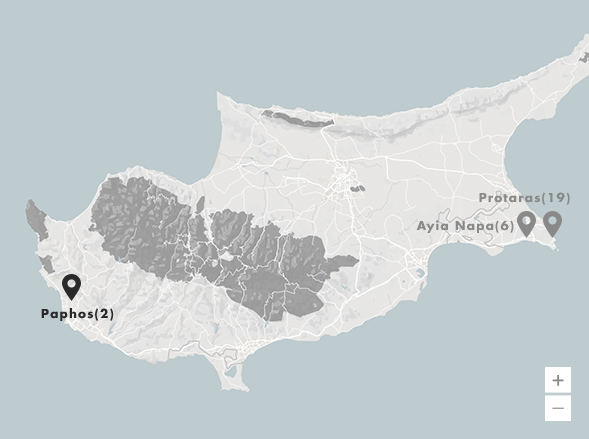
<style>
.page{position:relative;width:589px;height:439px;background:#becbcf}
.page>*{position:absolute;margin:0}
.t1{font:12px "FuturaLT-Bold";letter-spacing:0.1em;color:#898989}
.t2{font:12px "FuturaLT-Bold";letter-spacing:0.1em;color:#292929}
.t3{font:22px "FuturaLT";letter-spacing:0.1em;color:#898989}
</style>
<div class="page">
<p class="t1" style="left:479px;top:192px;width:91px;height:13px">Protaras(19)</p>
<p class="t1" style="left:416px;top:220px;width:98px;height:13px">Ayia Napa(6)</p>
<p class="t2" style="left:41px;top:308px;width:73px;height:13px">Paphos(2)</p>
<p class="t3" style="left:552px;top:374px;width:12px;height:12px">+</p>
<p class="t3" style="left:552px;top:407px;width:12px;height:2px">_</p>
</div>
